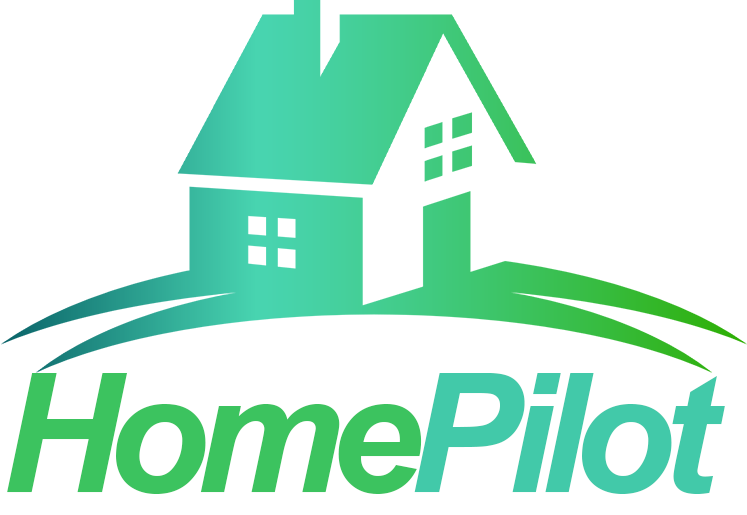
<style>
.page{position:relative;width:747px;height:515px;background:#ffffff}
.page>*{position:absolute;margin:0}
.t1{font:166.3px "Arial-BoldItalicMT";letter-spacing:-0.08em;color:#42c9a9}
.t2{font:166.3px "Arial-BoldItalicMT";letter-spacing:-0.08em;color:#3cc35f}
</style>
<div class="page">
<p class="t1" style="left:7px;top:373px;width:718px;height:121px"><span class="t2">Home</span>Pilot</p>
</div>
